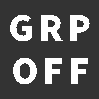
<style>
.page{position:relative;width:99px;height:99px;background:#333333}
.page>*{position:absolute;margin:0}
.t1{font:40px "SourceSansRoman-Black";letter-spacing:0.1em;color:#ffffff;text-transform:uppercase}
</style>
<div class="page">
<p class="t1" style="left:10px;top:15px;width:80px;height:26px">GRP</p>
<p class="t1" style="left:13px;top:58px;width:75px;height:26px">OFF</p>
</div>
